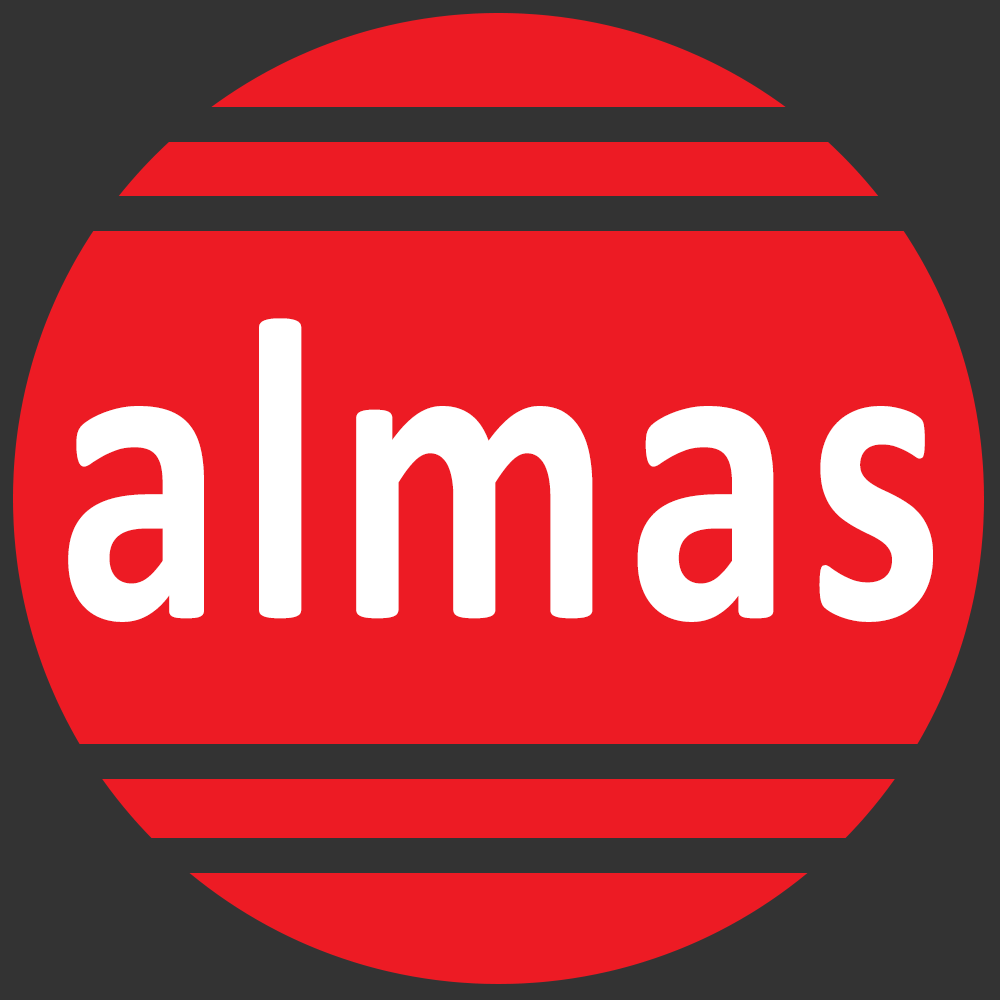
<style>
.page{position:relative;width:1000px;height:1000px;background:#ed1b24}
.page>*{position:absolute;margin:0}
.t1{font:439px "Calibri-Bold";letter-spacing:0.04em;color:#ffffff;scale:0.78 1}
</style>
<div class="page">
<p class="t1" style="left:68px;top:318px;width:865px;height:304px">almas</p>
</div>
